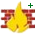
<style>
.page{position:relative;width:35px;height:35px;background:#ffffff}
.page>*{position:absolute;margin:0}
.t1{font:7.9px "Myriad-Bold";letter-spacing:0.18em;color:#017720;text-transform:uppercase;scale:1.12 1}
</style>
<div class="page">
<p class="t1" style="left:28px;top:3px;width:5px;height:5px">+</p>
</div>
